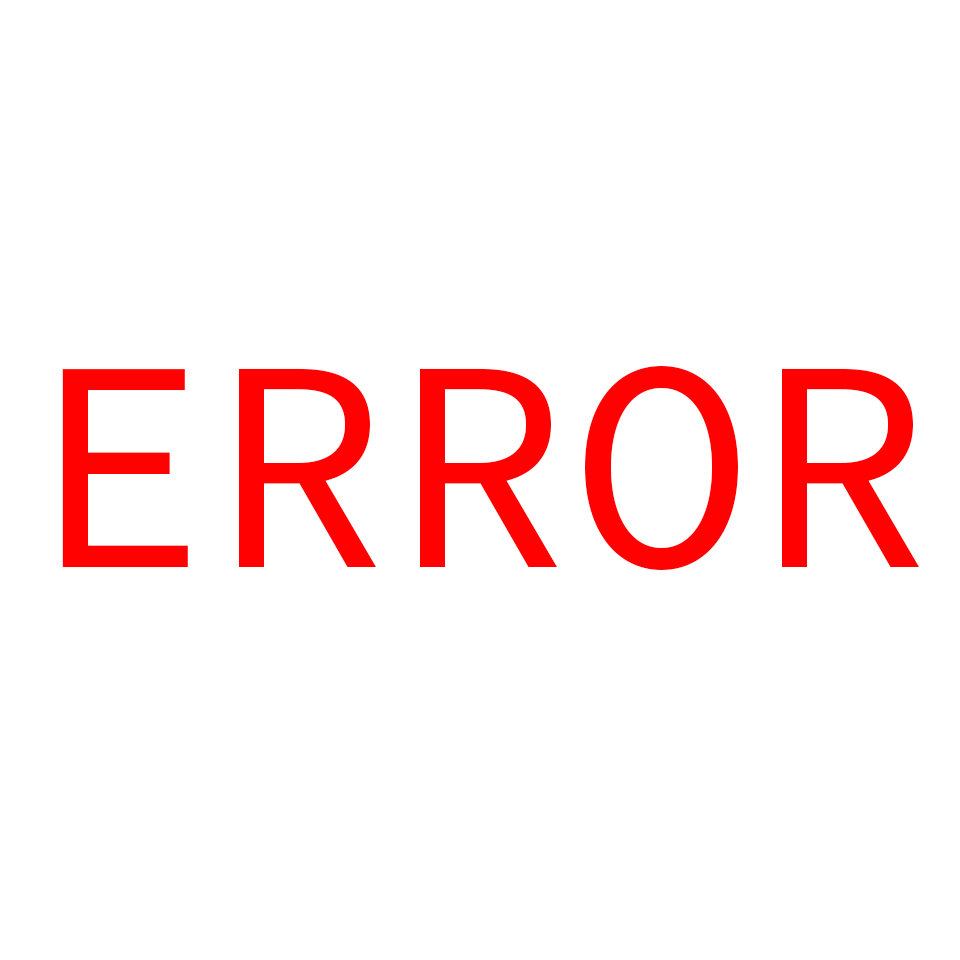
<style>
.page{position:relative;width:960px;height:960px;background:#ffffff}
.page>*{position:absolute;margin:0}
.t1{font:301.7px "SourceCodePro-Regular";color:#ff0101}
</style>
<div class="page">
<p class="t1" style="left:62px;top:366px;width:858px;height:204px">ERROR</p>
</div>
